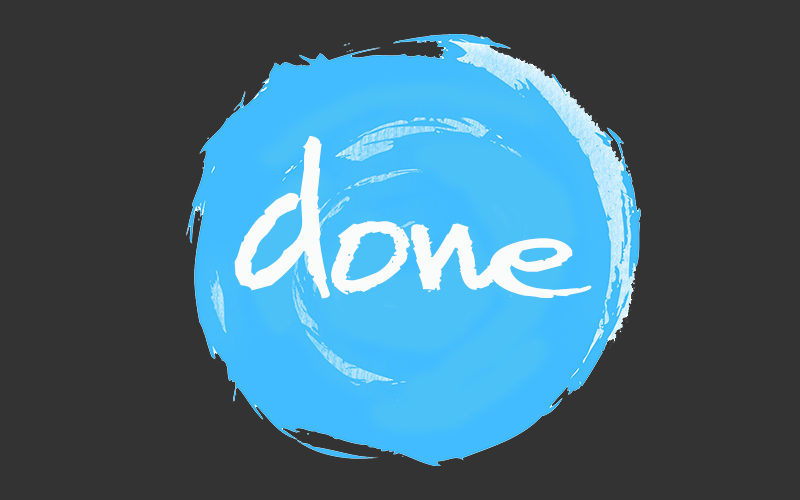
<style>
.page{position:relative;width:800px;height:500px;background:#333333}
.page>*{position:absolute;margin:0}
.t1{font:179.8px "Quikhand";color:#fafbfb;scale:1.14 1}
.t2{font:133.8px "Quikhand";color:#fafbfb;scale:1.37 1}
.t3{font:119.4px "Quikhand";color:#fafbfb;scale:1.74 1}
.t4{font:110.4px "Quikhand";color:#fafbfb;scale:2.44 1}
</style>
<div class="page">
<p class="t1" style="left:234px;top:135px;width:96px;height:164px">d</p>
<p class="t2" style="left:331px;top:221px;width:80px;height:74px">o</p>
<p class="t3" style="left:411px;top:223px;width:106px;height:70px">n</p>
<p class="t4" style="left:490px;top:238px;width:102px;height:60px">e</p>
</div>
